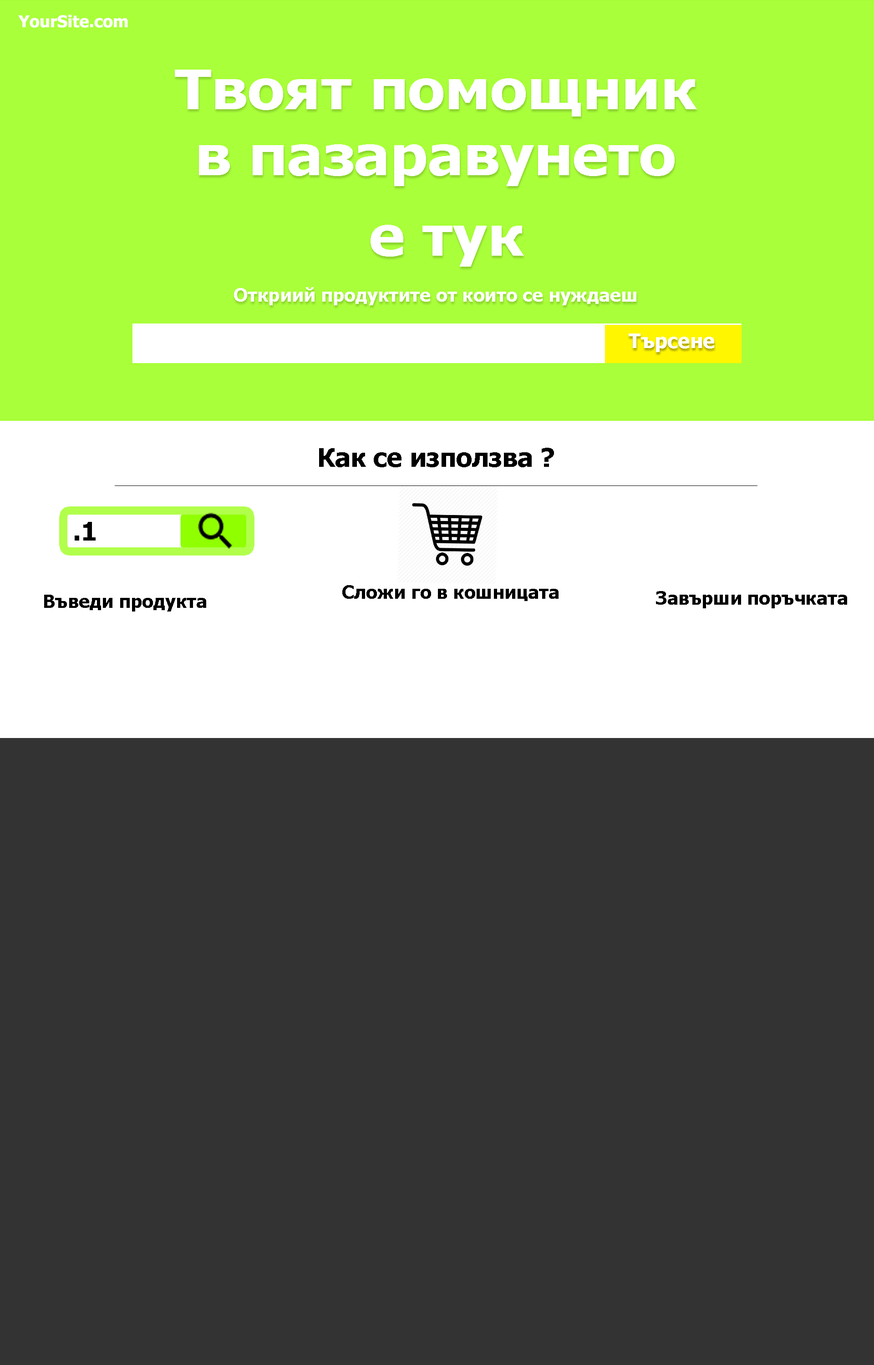
<style>
.page{position:relative;width:874px;height:1365px;background:#333333}
.page>*{position:absolute;margin:0}
.t1{font:16.4px "Tahoma-Bold";color:#ffffff}
.t2{font:54.7px "Tahoma-Bold";color:#ffffff;scale:1.09 1}
.t3{font:18.3px "Tahoma-Bold";color:#ffffff}
.t4{font:20.1px "Tahoma-Bold";color:#ffffff}
.t5{font:25.6px "Tahoma-Bold";color:#000000}
.t6{font:18.3px "Tahoma-Bold";color:#000000}
</style>
<div class="page">
<p class="t1" style="left:18px;top:15px;width:110px;height:13px">YourSite.com</p>
<p class="t2" style="left:175px;top:70px;width:522px;height:197px;text-align:center">Твоят помощник<br> в пазаравунето <br>е тук</p>
<p class="t3" style="left:234px;top:287px;width:402px;height:18px">Откриий продуктите от които се нуждаеш</p>
<p class="t4" style="left:628px;top:334px;width:86px;height:18px">Търсене</p>
<p class="t5" style="left:319px;top:448px;width:235px;height:19px">Как се използва ?</p>
<p class="t6" style="left:342px;top:585px;width:216px;height:16px">Сложи го в кошницата</p>
<p class="t6" style="left:656px;top:591px;width:191px;height:17px">Завърши поръчката</p>
<p class="t6" style="left:44px;top:595px;width:162px;height:17px">Въведи продукта</p>
</div>
